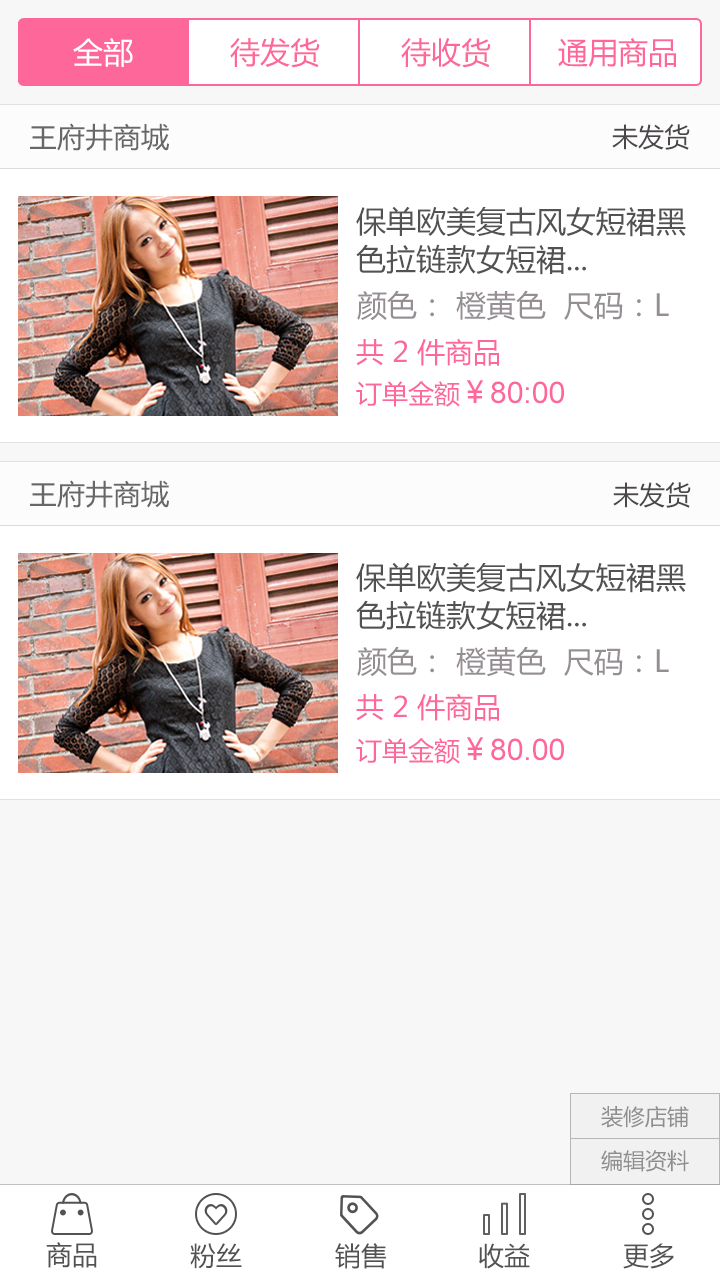
<style>
.page{position:relative;width:720px;height:1280px;background:#ffffff}
.page>*{position:absolute;margin:0}
.t1{font:30px "MicrosoftYaHei";color:#ffffff}
.t2{font:30px "MicrosoftYaHei";color:#fd679a}
.t3{font:28px "MicrosoftYaHei";color:#676767}
.t4{font:26px "MicrosoftYaHei";color:#4a4649}
.t5{font:30px/38px "MicrosoftYaHei";color:#525252}
.t6{font:30px "MicrosoftYaHei";color:#958f93}
.t7{font:28px "MicrosoftYaHei";color:#fd679a}
.t8{font:30px "ArialMT";color:#fd679a}
.t9{font:26px "MicrosoftYaHei";color:#fd679a}
.t10{font:22px "MicrosoftYaHei";color:#8e8e8e}
.t11{font:26px "MicrosoftYaHei";color:#525252}
</style>
<div class="page">
<p class="t1" style="left:73px;top:38px;width:60px;height:29px">全部</p>
<p class="t2" style="left:230px;top:37px;width:90px;height:31px">待发货</p>
<p class="t2" style="left:401px;top:38px;width:90px;height:30px">待收货</p>
<p class="t2" style="left:558px;top:38px;width:118px;height:29px">通用商品</p>
<p class="t3" style="left:30px;top:123px;width:139px;height:28px">王府井商城</p>
<p class="t4" style="left:612px;top:124px;width:78px;height:26px">未发货</p>
<p class="t5" style="left:356px;top:206px;width:330px;height:69px">保单欧美复古风女短裙黑<br>色拉链款女短裙...</p>
<p class="t6" style="left:357px;top:290px;width:312px;height:31px">颜色： 橙黄色  尺码：L</p>
<p class="t7" style="left:356px;top:338px;width:143px;height:28px">共 2 件商品</p>
<p class="t8" style="left:356px;top:380px;width:208px;height:27px"><span class="t9">订单金额</span><span class="t2">￥</span>80:00</p>
<p class="t3" style="left:30px;top:480px;width:139px;height:28px">王府井商城</p>
<p class="t4" style="left:613px;top:482px;width:78px;height:26px">未发货</p>
<p class="t5" style="left:356px;top:562px;width:330px;height:69px">保单欧美复古风女短裙黑<br>色拉链款女短裙...</p>
<p class="t6" style="left:357px;top:646px;width:312px;height:31px">颜色： 橙黄色  尺码：L</p>
<p class="t7" style="left:356px;top:693px;width:143px;height:28px">共 2 件商品</p>
<p class="t8" style="left:356px;top:737px;width:208px;height:27px"><span class="t9">订单金额</span><span class="t2">￥</span>80.00</p>
<p class="t10" style="left:601px;top:1106px;width:88px;height:22px">装修店铺</p>
<p class="t10" style="left:601px;top:1150px;width:88px;height:22px">编辑资料</p>
<p class="t11" style="left:46px;top:1242px;width:51px;height:26px">商品</p>
<p class="t11" style="left:190px;top:1243px;width:52px;height:26px">粉丝</p>
<p class="t11" style="left:335px;top:1243px;width:51px;height:26px">销售</p>
<p class="t11" style="left:479px;top:1243px;width:51px;height:26px">收益</p>
<p class="t11" style="left:623px;top:1243px;width:51px;height:26px">更多</p>
</div>
